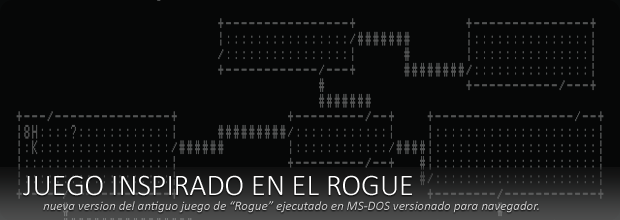
<style>
.page{position:relative;width:620px;height:220px;background:#060707}
.page>*{position:absolute;margin:0}
.t1{font:30px "Calibri-Light";color:#ffffff}
.t2{font:13px "Calibri-Italic";color:#cccccc}
</style>
<div class="page">
<p class="t1" style="left:23px;top:175px;width:389px;height:21px">JUEGO INSPIRADO EN EL ROGUE</p>
<p class="t2" style="left:43px;top:201px;width:496px;height:12px">nueva version del antiguo juego de “Rogue” ejecutado en MS-DOS versionado para navegador.</p>
</div>
